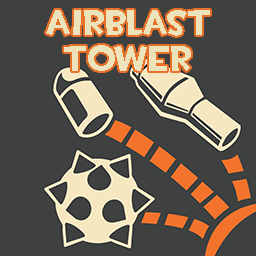
<style>
.page{position:relative;width:256px;height:256px;background:#3f4040}
.page>*{position:absolute;margin:0}
.t1{font:36px/36px "TF2Build";color:#ede3bb}
</style>
<div class="page">
<p class="t1" style="left:46px;top:10px;width:164px;height:61px;text-align:center">Airblast<br>Tower</p>
</div>
